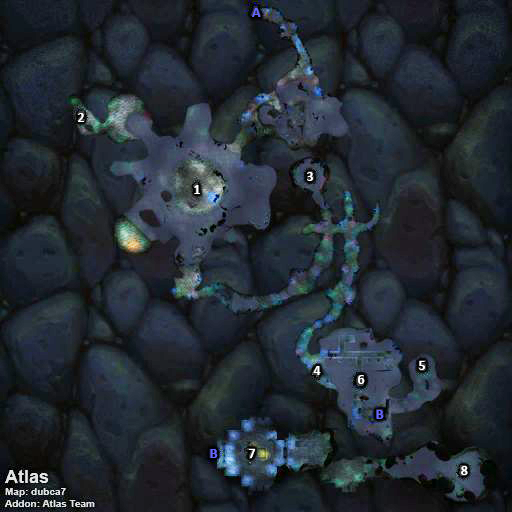
<style>
.page{position:relative;width:512px;height:512px}
.page>*{position:absolute;margin:0}
.t1{font:14px "Calibri-Bold";color:#6666ff}
.t2{font:14px "Calibri-Bold";color:#ffffff}
</style>
<div class="page">
<p class="t1" style="left:252px;top:8px;width:9px;height:9px">A</p>
<p class="t2" style="left:78px;top:113px;width:7px;height:9px">2</p>
<p class="t2" style="left:307px;top:172px;width:6px;height:9px">3</p>
<p class="t2" style="left:194px;top:185px;width:6px;height:9px">1</p>
<p class="t2" style="left:313px;top:366px;width:8px;height:9px">4</p>
<p class="t2" style="left:419px;top:361px;width:6px;height:9px">5</p>
<p class="t2" style="left:358px;top:375px;width:7px;height:9px">6</p>
<p class="t1" style="left:376px;top:410px;width:8px;height:9px">B</p>
<p class="t1" style="left:210px;top:449px;width:8px;height:9px">B</p>
<p class="t2" style="left:248px;top:449px;width:8px;height:9px">7</p>
<p class="t2" style="left:461px;top:466px;width:7px;height:9px">8</p>
</div>
